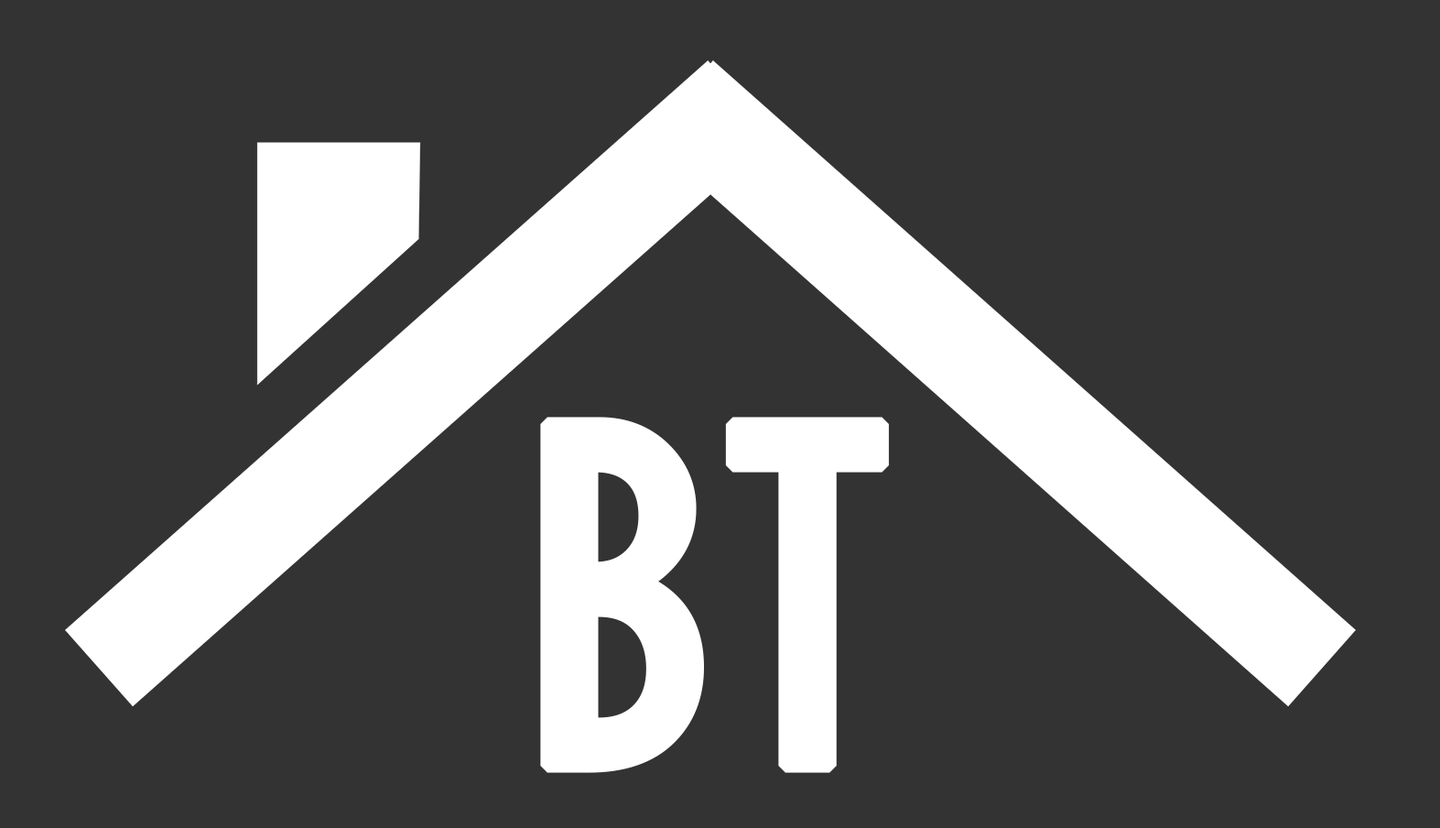
<style>
.page{position:relative;width:1440px;height:828px;background:#333333}
.page>*{position:absolute;margin:0}
.t1{font:511px "GillSansMT-Condensed";color:#ffffff;font-weight:bold}
</style>
<div class="page">
<p class="t1" style="left:540px;top:417px;width:349px;height:356px">BT</p>
</div>
